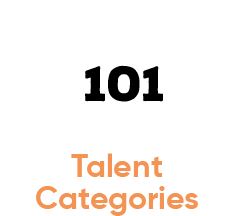
<style>
.page{position:relative;width:233px;height:216px;background:#ffffff}
.page>*{position:absolute;margin:0}
.t1{font:48px "NexaRustSans-Black";color:#000000}
.t2{font:32px/32px "Gilroy-Bold";color:#f39454}
</style>
<div class="page">
<p class="t1" style="left:85px;top:65px;width:78px;height:37px">101</p>
<p class="t2" style="left:36px;top:153px;width:162px;height:63px;text-align:center">Talent<br>Categories</p>
</div>
